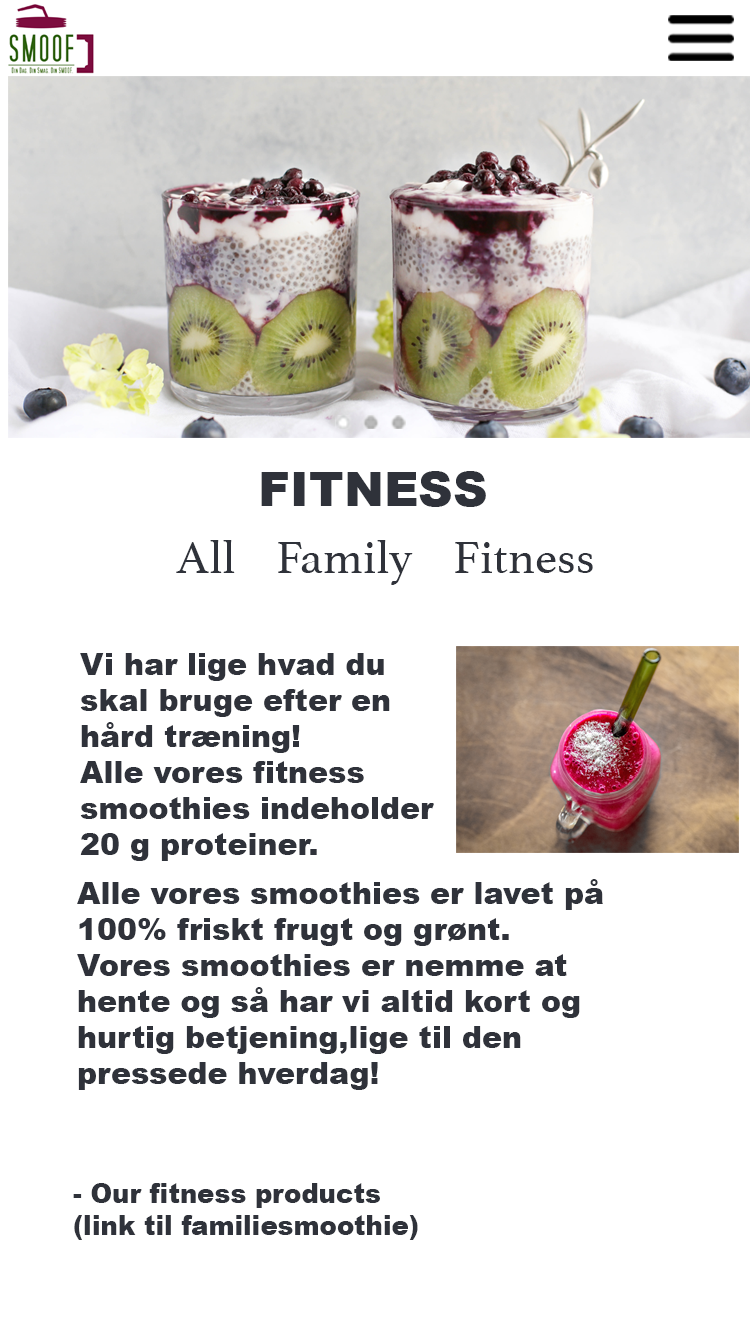
<style>
.page{position:relative;width:750px;height:1334px;background:#ffffff}
.page>*{position:absolute;margin:0}
.t1{font:48px "Arial-Black";color:#2f323a}
.t2{font:48px "Athelas-Regular";color:#2f323a}
.t3{font:30px "Arial-Black";color:#2f323a}
.t4{font:26.6px "Arial-Black";color:#2f323a}
</style>
<div class="page">
<p class="t1" style="left:261px;top:471px;width:225px;height:36px">FITNESS</p>
<p class="t2" style="left:176px;top:540px;width:417px;height:45px">All    Family    Fitness</p>
<p class="t3" style="left:80px;top:653px;width:354px;height:208px">Vi har lige hvad du skal bruge efter en hård træning!<br>Alle vores fitness smoothies indeholder 20 g proteiner.</p>
<p class="t3" style="left:77px;top:879px;width:526px;height:211px">Alle vores smoothies er lavet på 100% friskt frugt og grønt.<br>Vores smoothies er nemme at hente og så har vi altid kort og hurtig betjening,lige til den pressede hverdag!</p>
<p class="t4" style="left:73px;top:1183px;width:345px;height:57px">- Our fitness products (link til familiesmoothie)</p>
</div>
